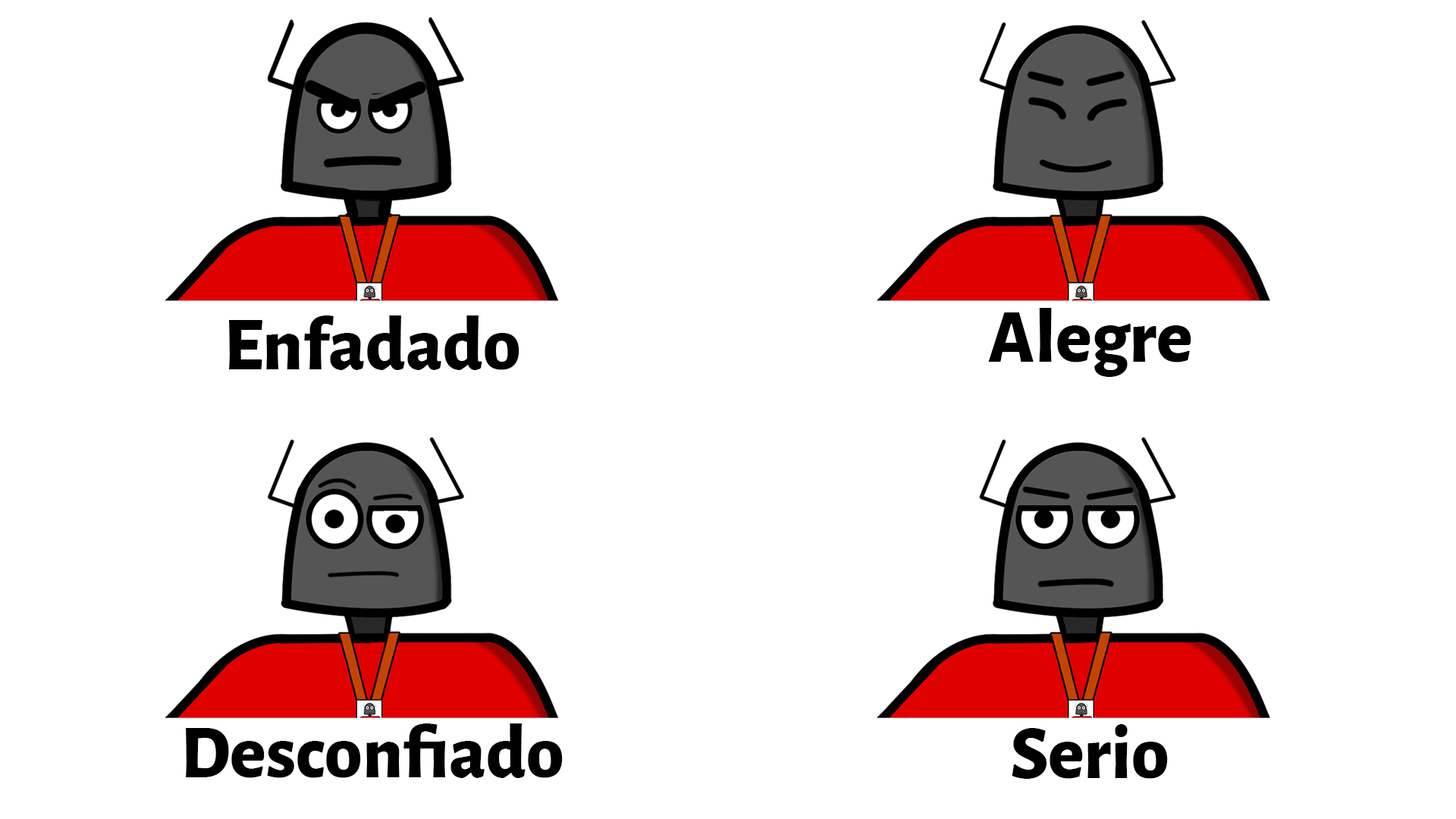
<style>
.page{position:relative;width:1456px;height:819px;background:#ffffff}
.page>*{position:absolute;margin:0}
.t1{font:75.8px "AlegreyaSans-ExtraBold";color:#000000}
</style>
<div class="page">
<p class="t1" style="left:229px;top:315px;width:290px;height:55px">Enfadado</p>
<p class="t1" style="left:988px;top:308px;width:203px;height:69px">Alegre</p>
<p class="t1" style="left:186px;top:723px;width:377px;height:55px">Desconfiado</p>
<p class="t1" style="left:1012px;top:724px;width:156px;height:55px">Serio</p>
</div>
